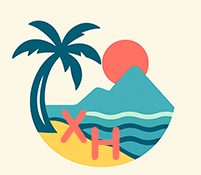
<style>
.page{position:relative;width:201px;height:175px}
.page>*{position:absolute;margin:0}
.t1{font:46.1px "ArialRoundedMTBold";color:#ff7163}
</style>
<div class="page">
<p class="t1" style="left:60px;top:110px;width:27px;height:33px">X</p>
<p class="t1" style="left:91px;top:127px;width:29px;height:33px">H</p>
</div>
